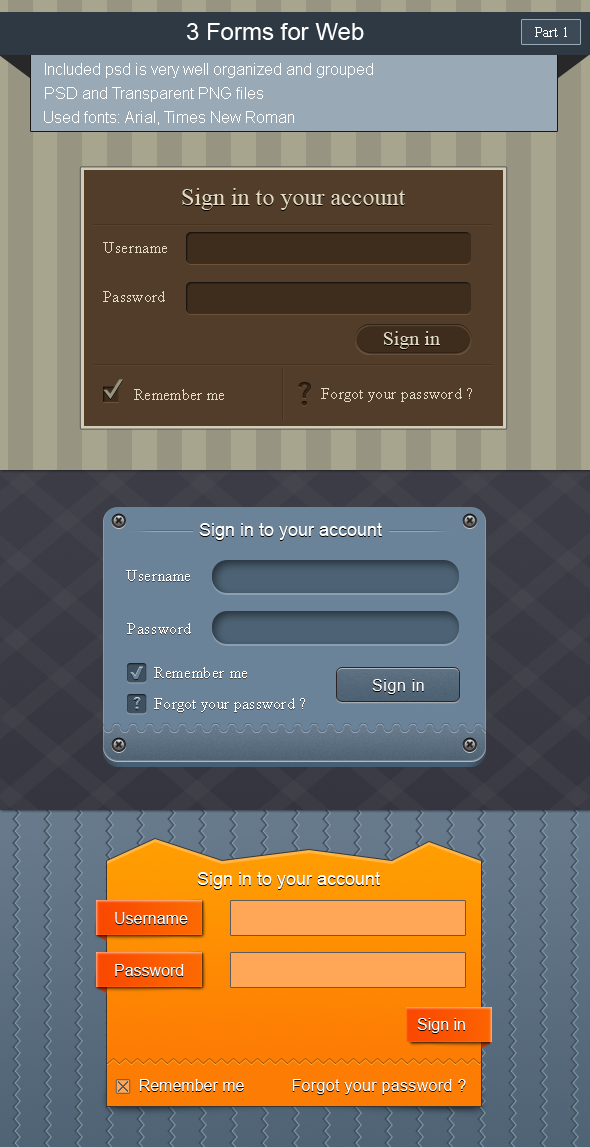
<style>
.page{position:relative;width:590px;height:1147px}
.page>*{position:absolute;margin:0}
.t1{font:24px "ArialMT";color:#ffffff}
.t2{font:14px "TimesNewRomanPSMT";color:#ffffff}
.t3{font:16px "ArialMT";color:#ffffff}
.t4{font:24px "TimesNewRomanPSMT"}
.t5{font:24px "TimesNewRomanPSMT";color:#e2dbc1}
.t6{font:16px "TimesNewRomanPSMT";letter-spacing:0.04em;color:#e2dbc1}
.t7{font:16px "TimesNewRomanPSMT";letter-spacing:0.02em;color:#e2dbc1}
.t8{font:20px "TimesNewRomanPSMT"}
.t9{font:20px "TimesNewRomanPSMT";color:#e2dbc1}
.t10{font:30px "BellGothicStd-Bold";letter-spacing:0.02em;color:#352517;font-weight:bold}
.t11{font:30px "BellGothicStd-Bold";letter-spacing:0.02em;color:#362617;font-weight:bold}
.t12{font:18px "ArialMT"}
.t13{font:18px "ArialMT";color:#ffffff}
.t14{font:16px "TimesNewRomanPSMT";letter-spacing:0.04em;color:#ffffff}
.t15{font:16px "ArialMT";letter-spacing:0.04em}
.t16{font:16px "ArialMT";letter-spacing:0.04em;color:#ffffff}
.t17{font:16px "BellGothicStd-Bold";letter-spacing:0.02em;color:#6a8398;font-weight:bold}
.t18{font:16px "TimesNewRomanPSMT";letter-spacing:0.02em;color:#ffffff}
.t19{font:16px "ArialMT"}
.t20{font:16px "ArialMT";letter-spacing:0.02em}
.t21{font:16px "ArialMT";letter-spacing:0.02em;color:#ffffff}
</style>
<div class="page">
<p class="t1" style="left:187px;top:23px;width:177px;height:17px">3 Forms for Web</p>
<p class="t2" style="left:535px;top:27px;width:32px;height:10px">Part 1</p>
<p class="t3" style="left:45px;top:63px;width:328px;height:15px">Included psd is very well organized and grouped</p>
<p class="t3" style="left:45px;top:87px;width:218px;height:15px">PSD and Transparent PNG files</p>
<p class="t3" style="left:44px;top:111px;width:250px;height:14px">Used fonts: Arial, Times New Roman</p>
<p class="t4" style="left:182px;top:189px;width:223px;height:22px">Sign in to your account</p>
<p class="t5" style="left:182px;top:188px;width:223px;height:22px">Sign in to your account</p>
<p class="t6" style="left:103px;top:242px;width:64px;height:11px">Username</p>
<p class="t7" style="left:103px;top:291px;width:62px;height:11px">Password</p>
<p class="t8" style="left:383px;top:332px;width:57px;height:18px">Sign in</p>
<p class="t9" style="left:383px;top:331px;width:57px;height:18px">Sign in</p>
<p class="t7" style="left:134px;top:389px;width:90px;height:11px">Remember me</p>
<p class="t10" style="left:298px;top:383px;width:13px;height:24px">?</p>
<p class="t11" style="left:298px;top:382px;width:13px;height:24px">?</p>
<p class="t7" style="left:321px;top:388px;width:151px;height:14px">Forgot your password ?</p>
<p class="t12" style="left:199px;top:524px;width:183px;height:17px">Sign in to your account</p>
<p class="t13" style="left:199px;top:523px;width:183px;height:17px">Sign in to your account</p>
<p class="t14" style="left:126px;top:570px;width:64px;height:11px">Username</p>
<p class="t14" style="left:127px;top:623px;width:64px;height:11px">Password</p>
<p class="t14" style="left:154px;top:667px;width:93px;height:11px">Remember me</p>
<p class="t15" style="left:372px;top:680px;width:52px;height:15px">Sign in</p>
<p class="t16" style="left:372px;top:679px;width:52px;height:15px">Sign in</p>
<p class="t17" style="left:133px;top:697px;width:8px;height:13px">?</p>
<p class="t18" style="left:154px;top:698px;width:151px;height:14px">Forgot your password ?</p>
<p class="t12" style="left:197px;top:873px;width:183px;height:17px">Sign in to your account</p>
<p class="t13" style="left:197px;top:872px;width:183px;height:17px">Sign in to your account</p>
<p class="t19" style="left:115px;top:913px;width:73px;height:12px">Username</p>
<p class="t3" style="left:115px;top:912px;width:73px;height:12px">Username</p>
<p class="t19" style="left:115px;top:965px;width:69px;height:12px">Password</p>
<p class="t3" style="left:115px;top:964px;width:69px;height:12px">Password</p>
<p class="t19" style="left:417px;top:1019px;width:48px;height:15px">Sign in</p>
<p class="t3" style="left:417px;top:1018px;width:48px;height:15px">Sign in</p>
<p class="t19" style="left:139px;top:1080px;width:105px;height:12px">Remember me</p>
<p class="t3" style="left:139px;top:1079px;width:105px;height:12px">Remember me</p>
<p class="t20" style="left:292px;top:1080px;width:174px;height:15px">Forgot your password ?</p>
<p class="t21" style="left:292px;top:1079px;width:174px;height:15px">Forgot your password ?</p>
</div>
